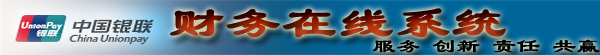
<style>
.page{position:relative;width:600px;height:55px}
.page>*{position:absolute;margin:0}
.t1{font:42.7px "LiSu";font-weight:bold;scale:1.29 1}
.t2{font:19.4px "LiSu";color:#0a0a0a;font-weight:bold;scale:1.2 1}
</style>
<div class="page">
<p class="t1" style="left:170px;top:8px;width:336px;height:30px">财务在线系统</p>
<p class="t2" style="left:372px;top:39px;width:228px;height:14px">服务 创新 责任 共赢</p>
</div>
